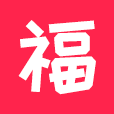
<style>
.page{position:relative;width:114px;height:114px;background:#ff244c}
.page>*{position:absolute;margin:0}
.t1{font:90px "HappyZcool-2016";letter-spacing:-0.02em;color:#ffffff}
</style>
<div class="page">
<p class="t1" style="left:18px;top:20px;width:78px;height:75px">福</p>
</div>
